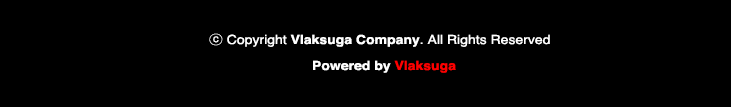
<style>
.page{position:relative;width:731px;height:107px;background:#000000}
.page>*{position:absolute;margin:0}
.t1{font:12.6px "Helvetica";color:#ffffff;scale:1.11 1}
.t2{font:12.6px "Gulim";color:#ffffff;scale:1.11 1}
.t3{font:12.6px "Helvetica-Bold";color:#ffffff;scale:1.11 1}
.t4{font:12.6px "Helvetica-Bold";color:#ff0000;scale:1.11 1}
</style>
<div class="page">
<p class="t1" style="left:209px;top:33px;width:341px;height:14px"><span class="t2">ⓒ</span> Copyright <span class="t3">Vlaksuga Company</span>. All Rights Reserved</p>
<p class="t3" style="left:313px;top:60px;width:143px;height:13px">Powered by <span class="t4">Vlaksuga</span></p>
</div>
